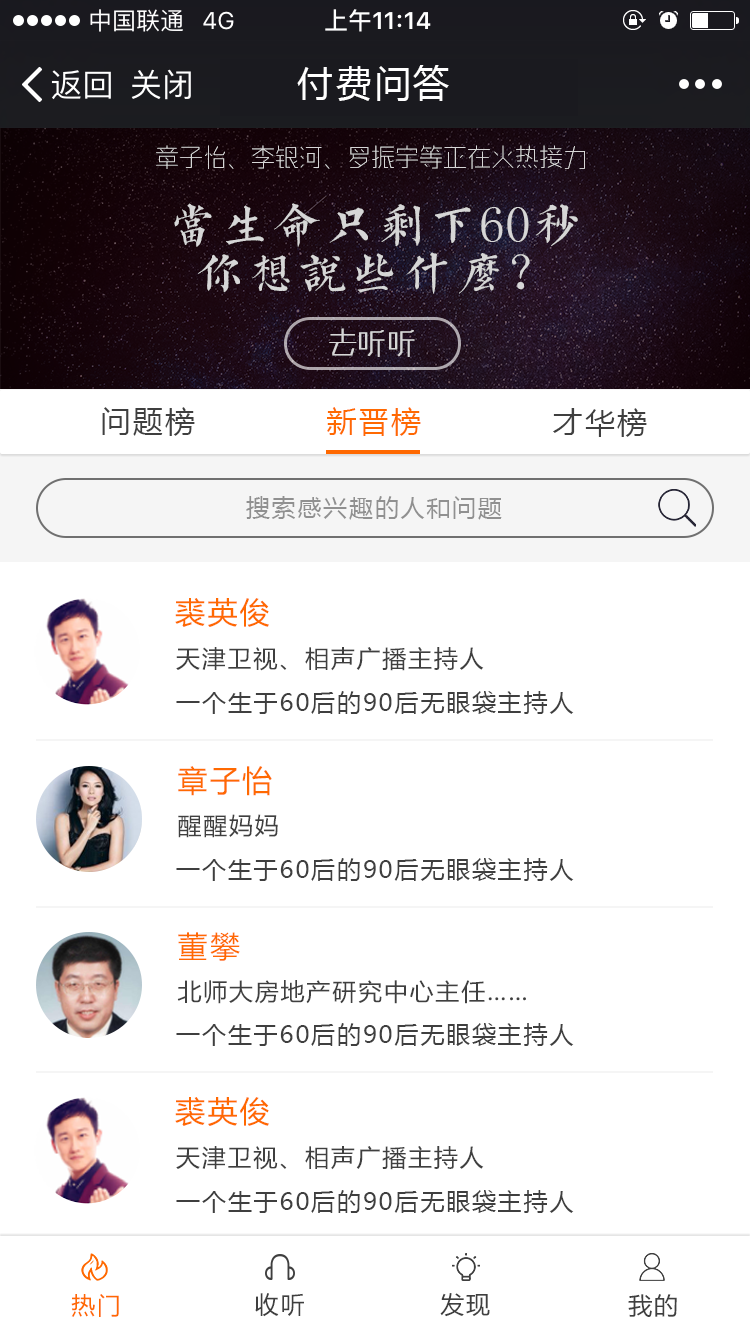
<style>
.page{position:relative;width:750px;height:1334px;background:#ffffff}
.page>*{position:absolute;margin:0}
.t1{font:36px "MicrosoftYaHei";letter-spacing:0.075em;color:#ffffff}
.t2{font:30px "MicrosoftYaHei";letter-spacing:0.075em;color:#3f3f3f}
.t3{font:30px "MicrosoftYaHei";letter-spacing:0.075em;color:#ff6901}
.t4{font:24px "MicrosoftYaHei";letter-spacing:0.075em;color:#909090}
.t5{font:29.9px "MicrosoftYaHei";letter-spacing:0.075em;color:#ff6901}
.t6{font:24px "MicrosoftYaHei";letter-spacing:0.075em;color:#3f3f3f}
.t7{font:29.8px "MicrosoftYaHei";letter-spacing:0.075em;color:#ff6901}
.t8{font:23.8px "MicrosoftYaHei";letter-spacing:0.075em;color:#3f3f3f}
.t9{font:24px "MicrosoftYaHei";letter-spacing:0.075em;color:#ff6901}
</style>
<div class="page">
<p class="t1" style="left:297px;top:65px;width:152px;height:36px">付费问答</p>
<p class="t2" style="left:102px;top:407px;width:93px;height:29px">问题榜</p>
<p class="t3" style="left:327px;top:407px;width:94px;height:29px">新晋榜</p>
<p class="t2" style="left:553px;top:408px;width:94px;height:29px">才华榜</p>
<p class="t4" style="left:246px;top:496px;width:256px;height:24px">搜索感兴趣的人和问题</p>
<p class="t5" style="left:175px;top:598px;width:94px;height:29px">裘英俊</p>
<p class="t6" style="left:176px;top:647px;width:308px;height:24px">天津卫视、相声广播主持人</p>
<p class="t6" style="left:176px;top:691px;width:398px;height:23px">一个生于60后的90后无眼袋主持人</p>
<p class="t7" style="left:178px;top:766px;width:94px;height:30px">章子怡</p>
<p class="t8" style="left:178px;top:814px;width:100px;height:24px">醒醒妈妈</p>
<p class="t6" style="left:176px;top:858px;width:398px;height:23px">一个生于60后的90后无眼袋主持人</p>
<p class="t7" style="left:178px;top:932px;width:62px;height:29px">董攀</p>
<p class="t8" style="left:177px;top:980px;width:349px;height:24px">北师大房地产研究中心主任……</p>
<p class="t6" style="left:176px;top:1023px;width:398px;height:23px">一个生于60后的90后无眼袋主持人</p>
<p class="t5" style="left:175px;top:1097px;width:94px;height:29px">裘英俊</p>
<p class="t6" style="left:176px;top:1146px;width:308px;height:24px">天津卫视、相声广播主持人</p>
<p class="t6" style="left:176px;top:1190px;width:398px;height:23px">一个生于60后的90后无眼袋主持人</p>
<p class="t9" style="left:71px;top:1294px;width:48px;height:23px">热门</p>
<p class="t6" style="left:255px;top:1293px;width:49px;height:24px">收听</p>
<p class="t6" style="left:440px;top:1293px;width:50px;height:24px">发现</p>
<p class="t6" style="left:628px;top:1294px;width:49px;height:23px">我的</p>
</div>
